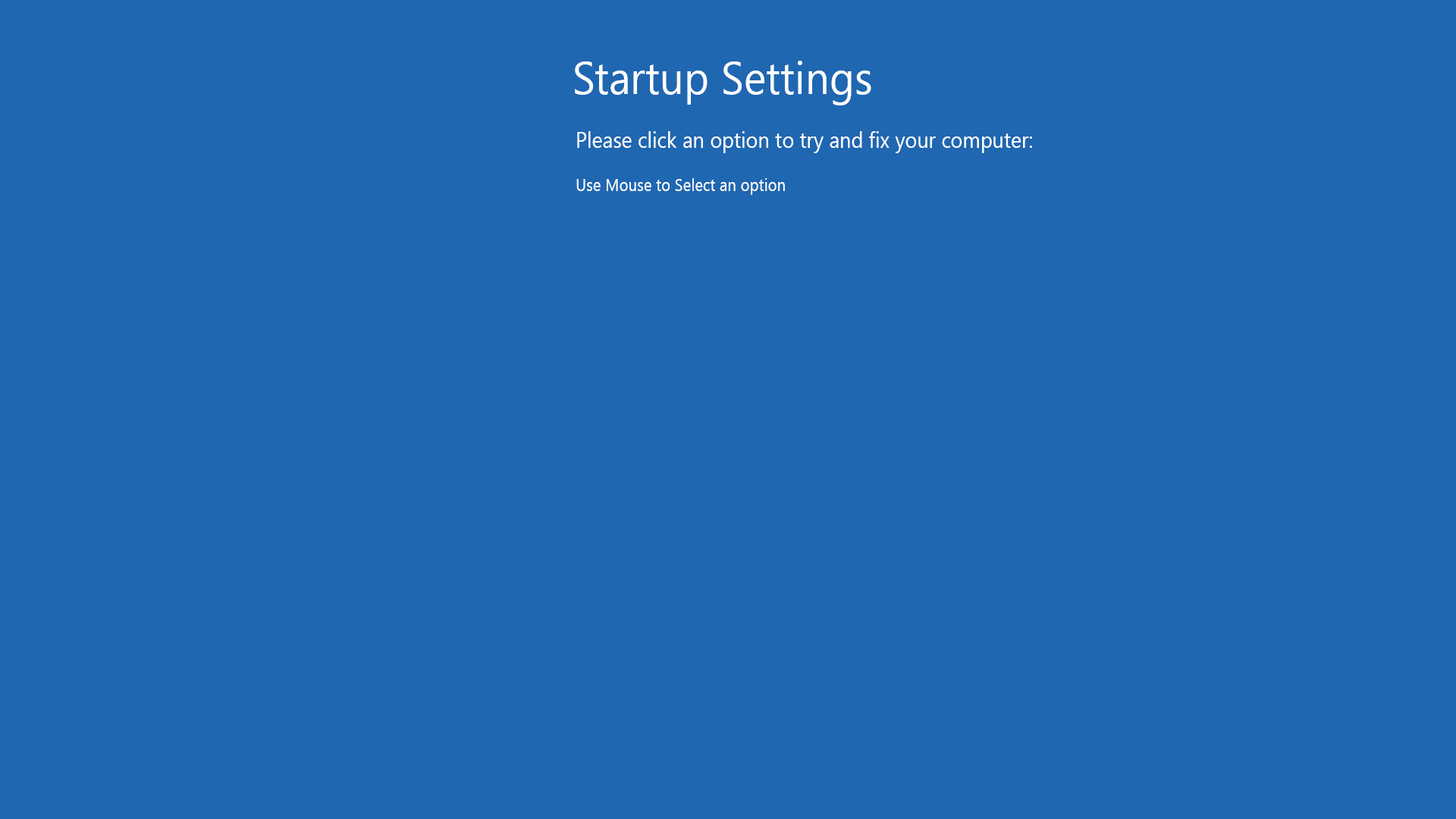
<style>
.page{position:relative;width:1456px;height:819px;background:#1f67b1}
.page>*{position:absolute;margin:0}
.t1{font:45.5px "SegoeUI";color:#ffffff;scale:0.94 1}
.t2{font:22px "SegoeUI";color:#ffffff;scale:0.93 1}
.t3{font:17.4px "SegoeUI";color:#ffffff;scale:0.89 1}
</style>
<div class="page">
<p class="t1" style="left:575px;top:61px;width:296px;height:44px">Startup Settings</p>
<p class="t2" style="left:577px;top:131px;width:455px;height:22px">Please click an option to try and fix your computer:</p>
<p class="t3" style="left:576px;top:178px;width:209px;height:17px">Use Mouse to Select an option</p>
</div>
